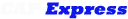
<style>
.page{position:relative;width:128px;height:19px;background:#ffffff}
.page>*{position:absolute;margin:0}
.t1{font:17.2px "Rockwell-ExtraBold";letter-spacing:0.01em;color:#0e19e7;font-style:italic}
.t2{font:17.2px "Rockwell-ExtraBold";letter-spacing:0.01em;color:#fbfbfc;font-style:italic}
</style>
<div class="page">
<p class="t1" style="left:0px;top:2px;width:127px;height:17px"><span class="t2">CAP </span>Express</p>
</div>
